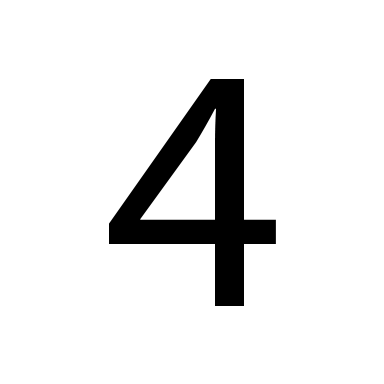
<style>
.page{position:relative;width:384px;height:384px;background:#ffffff}
.page>*{position:absolute;margin:0}
.t1{font:350px "MyriadPro-Regular";color:#000000}
</style>
<div class="page">
<p class="t1" style="left:109px;top:79px;width:167px;height:227px">4</p>
</div>
